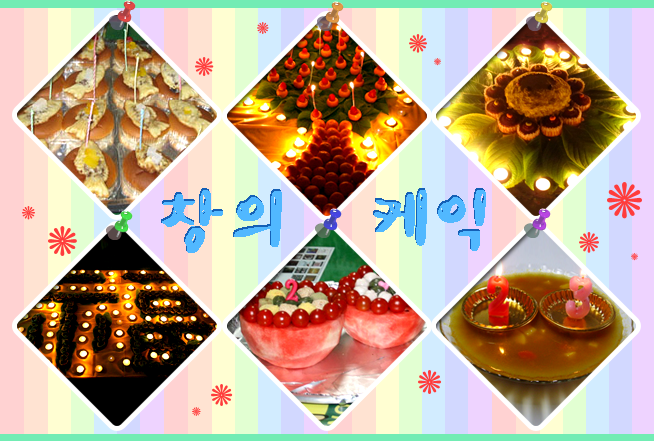
<style>
.page{position:relative;width:654px;height:441px}
.page>*{position:absolute;margin:0}
.t1{font:71.3px "pnhsea--KSCpc-EUC-H";letter-spacing:-0.12em;color:#51b8ff;font-weight:bold}
</style>
<div class="page">
<p class="t1" style="left:161px;top:188px;width:121px;height:65px">창의</p>
<p class="t1" style="left:373px;top:188px;width:113px;height:63px">케익</p>
</div>
